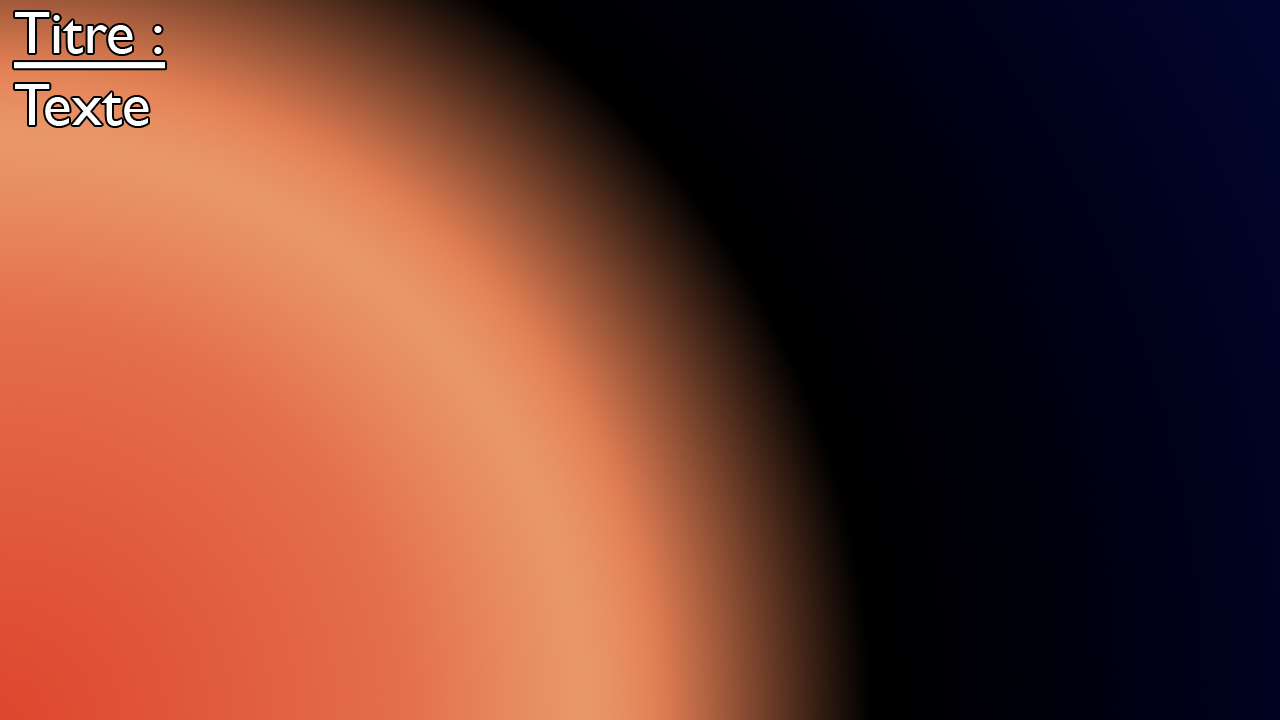
<style>
.page{position:relative;width:1280px;height:720px}
.page>*{position:absolute;margin:0}
.t1{font:60px "GillSansNova";color:#ffffff;text-decoration:underline}
.t2{font:60px "GillSansNova";color:#ffffff}
</style>
<div class="page">
<p class="t1" style="left:14px;top:12px;width:152px;height:114px">Titre :<br><span class="t2">Texte</span></p>
</div>
